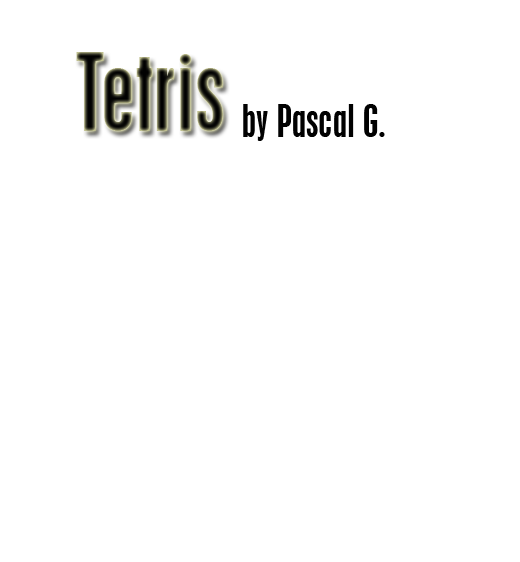
<style>
.page{position:relative;width:520px;height:562px;background:#ffffff}
.page>*{position:absolute;margin:0}
.t1{font:96px "PlacardMT-Condensed"}
.t2{font:40px "PlacardMT-Condensed";color:#010101}
</style>
<div class="page">
<p class="t1" style="left:76px;top:52px;width:147px;height:79px">Tetris</p>
<p class="t2" style="left:243px;top:104px;width:142px;height:37px">by Pascal G.</p>
</div>
